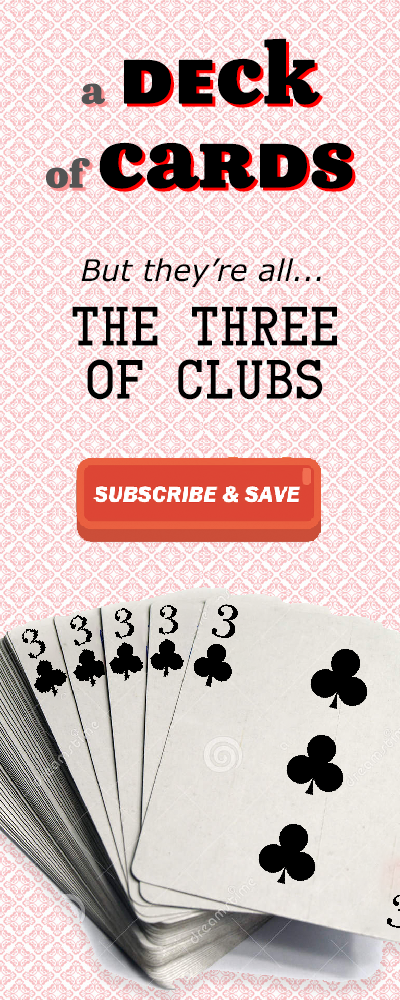
<style>
.page{position:relative;width:400px;height:1000px}
.page>*{position:absolute;margin:0}
.t1{font:80px/84px "PokerfaceW01-Regular";color:#000000}
.t2{font:36px/84px "PokerfaceW01-Regular";color:#545454}
.t3{font:36px/84px "PokerfaceW01-Regular";color:#000000}
.t4{font:30px "Verdana-Italic";color:#000000}
.t5{font:45.9px/53.2px "CardCharacters";color:#000000}
</style>
<div class="page">
<p class="t1" style="left:46px;top:38px;width:307px;height:151px;text-align:center"><span class="t2">a </span>deck<br><span class="t2">of </span>cards</p>
<p class="t1" style="left:49px;top:41px;width:307px;height:151px;text-align:center"><span class="t3">a </span>deck<br><span class="t3">of </span>cards</p>
<p class="t4" style="left:81px;top:258px;width:240px;height:29px">But they’re all...</p>
<p class="t5" style="left:72px;top:306px;width:265px;height:94px;text-align:center">The three<br>OF CLUBS</p>
</div>
